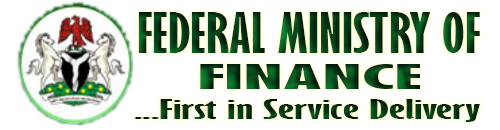
<style>
.page{position:relative;width:500px;height:130px;background:#ffffff}
.page>*{position:absolute;margin:0}
.t1{font:51.4px "GillSansMT-ExtraCondensedBold";scale:1.36 1}
.t2{font:31.9px "GillSansMT-ExtraCondensedBold";scale:3.87 1}
.t3{font:24.8px "GillSansMT-ExtraCondensedBold";color:#063314;scale:2.48 1}
</style>
<div class="page">
<p class="t1" style="left:138px;top:12px;width:342px;height:41px">FEDERAL MINISTRY OF</p>
<p class="t2" style="left:200px;top:64px;width:220px;height:25px">FINANCE</p>
<p class="t3" style="left:134px;top:99px;width:346px;height:23px">...First in Service Delivery</p>
</div>
